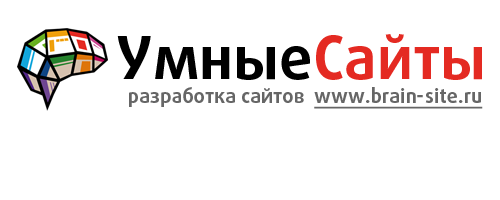
<style>
.page{position:relative;width:500px;height:200px;background:#ffffff}
.page>*{position:absolute;margin:0}
.t1{font:60px "DaxlinePro-Bold";color:#000000}
.t2{font:60px "DaxlinePro-Bold";color:#e42a22}
.t3{font:20px "DaxlinePro-Bold";color:#666666}
.t4{font:20px "DaxlinePro-Bold";color:#666666;text-decoration:underline}
</style>
<div class="page">
<p class="t1" style="left:117px;top:34px;width:365px;height:46px">Умные<span class="t2">Сайты</span></p>
<p class="t3" style="left:129px;top:87px;width:354px;height:22px">разработка сайтов  <span class="t4">www.brain-site.ru</span></p>
</div>
